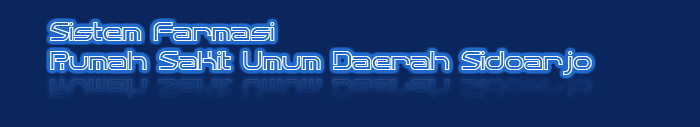
<style>
.page{position:relative;width:700px;height:127px;background:#0b265d}
.page>*{position:absolute;margin:0}
.t1{font:24px "QuantumFlatHollow(BRK)";color:#fffffe}
</style>
<div class="page">
<p class="t1" style="left:50px;top:22px;width:542px;height:53px">Sistem farmasi<br>Rumah Sakit Umum Daerah Sidoarjo</p>
</div>
